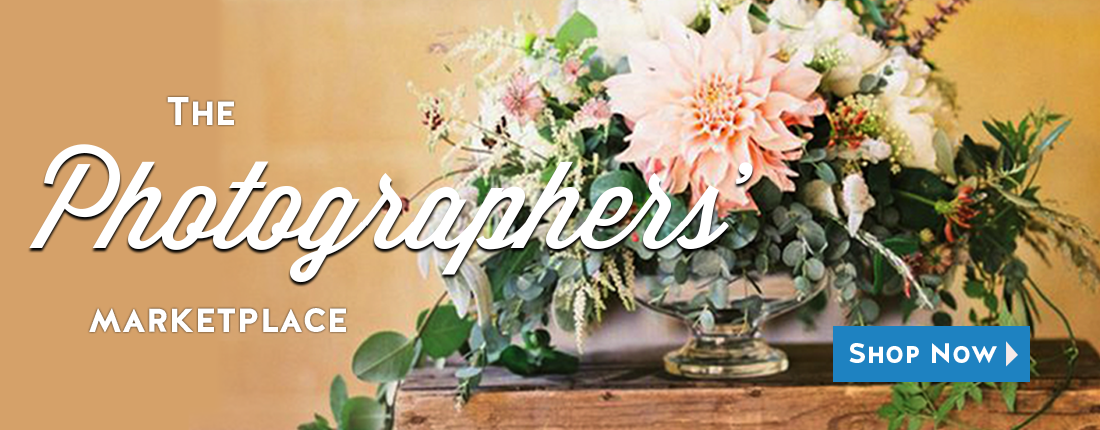
<style>
.page{position:relative;width:1100px;height:430px}
.page>*{position:absolute;margin:0}
.t1{font:40px "HalisGR-SBold";color:#ffffff}
.t2{font:120px "Wisdom-Script";color:#ffffff}
.t3{font:28.7px "HalisGR-SBold";color:#ffffff}
</style>
<div class="page">
<p class="t1" style="left:167px;top:97px;width:67px;height:28px">The</p>
<p class="t2" style="left:29px;top:144px;width:724px;height:139px">Photographers’</p>
<p class="t1" style="left:89px;top:308px;width:257px;height:24px">marketplace</p>
<p class="t3" style="left:849px;top:343px;width:148px;height:20px">Shop Now</p>
</div>
